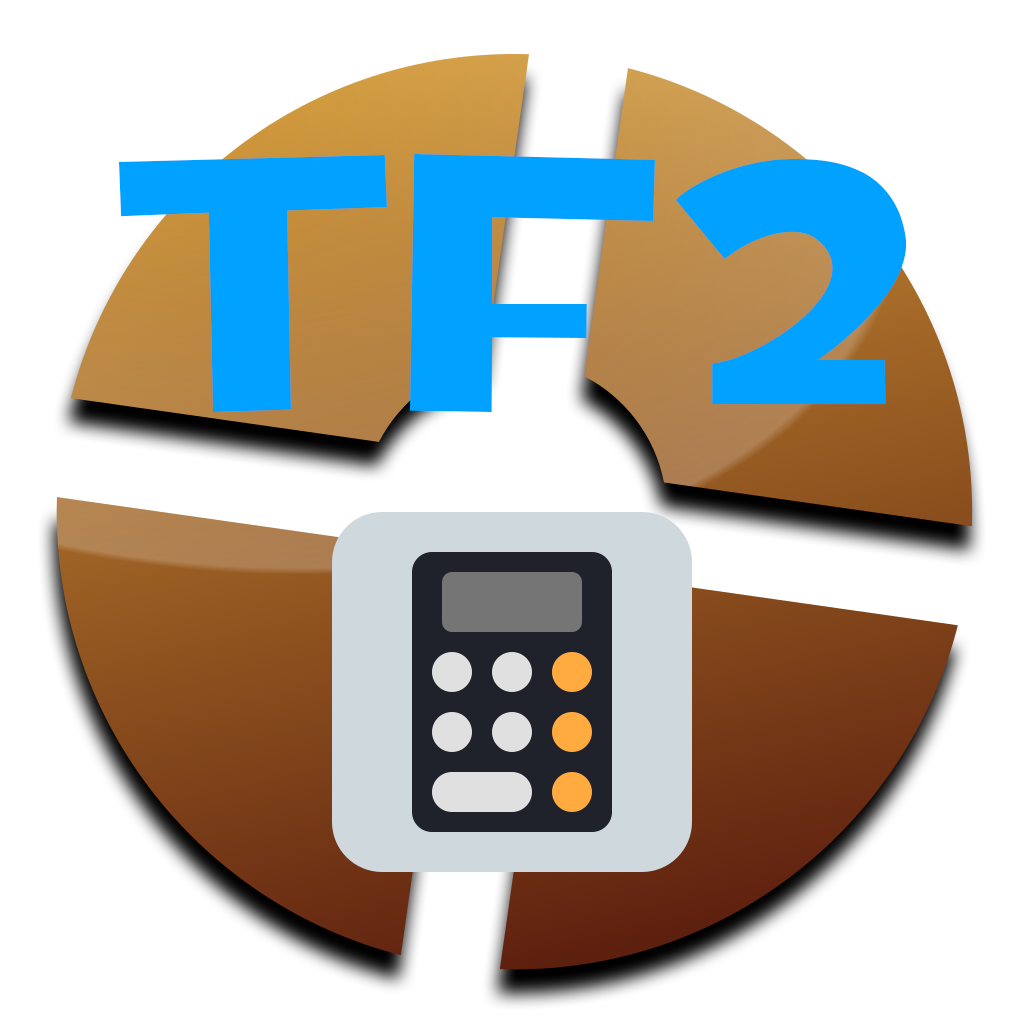
<style>
.page{position:relative;width:1024px;height:1024px;background:#ffffff}
.page>*{position:absolute;margin:0}
.t1{font:366.2px "TF2Build";color:#00a1ff;scale:1.18 1}
</style>
<div class="page">
<p class="t1" style="left:119px;top:154px;width:788px;height:258px">TF2</p>
</div>
